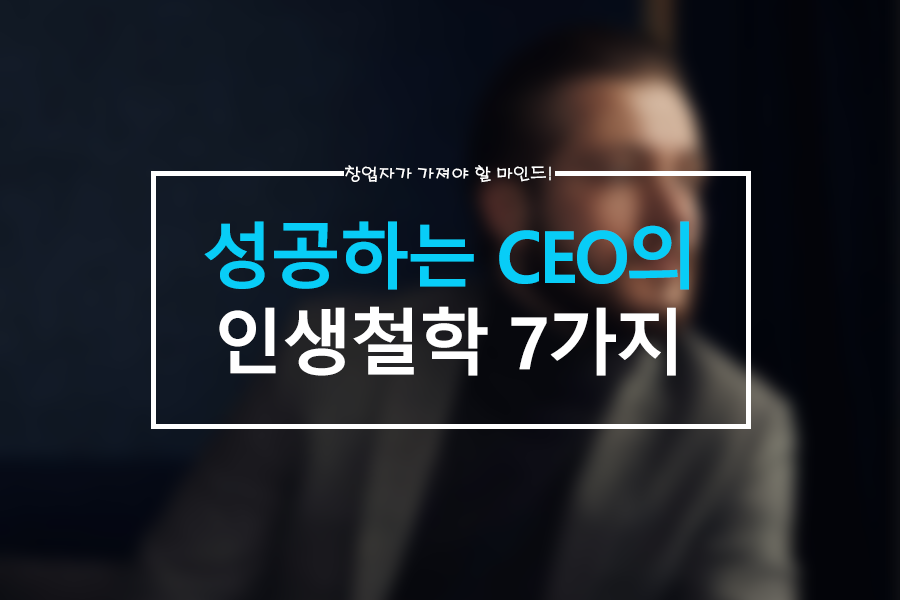
<style>
.page{position:relative;width:900px;height:600px}
.page>*{position:absolute;margin:0}
.t1{font:18px "H2porM";letter-spacing:-0.05em;color:#ffffff}
.t2{font:72px "MalgunGothicBold";letter-spacing:-0.05em;color:#08cdf7}
.t3{font:72px "MalgunGothicBold";letter-spacing:-0.05em;color:#ffffff}
</style>
<div class="page">
<p class="t1" style="left:345px;top:165px;width:206px;height:18px">창업자가 가져야 할 마인드!</p>
<p class="t2" style="left:204px;top:221px;width:485px;height:155px;text-align:center">성공하는 CEO의<br><span class="t3">인생철학 7가지</span></p>
</div>
